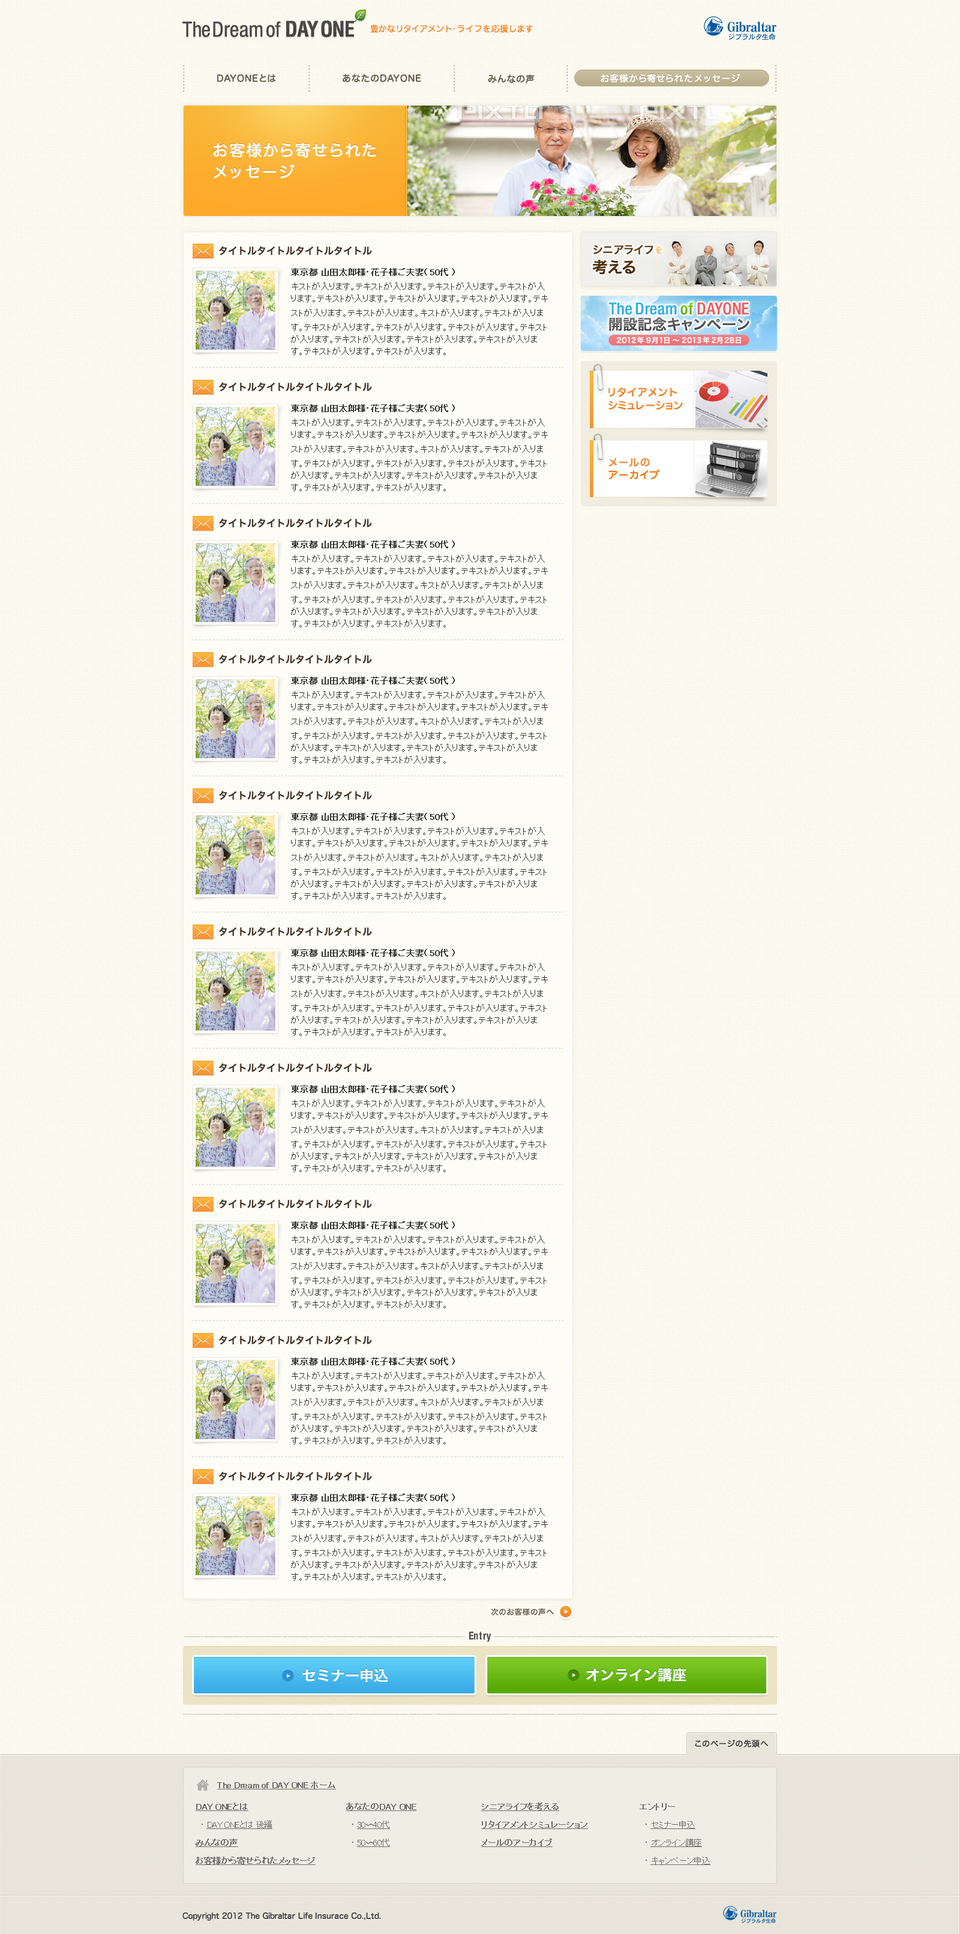
<style>
.page{position:relative;width:960px;height:1934px}
.page>*{position:absolute;margin:0}
.t1{font:21px "Helvetica57-Condensed";color:#474644}
.t2{font:21px "Helvetica-CondensedBold";color:#474644}
.t3{font:8.4px "HiraMaruProN-W4";color:#f18020}
.t4{font:9px "HiraMaruProN-W4";letter-spacing:0.05em;color:#665f4a;font-weight:bold}
.t5{font:9px "HiraMaruProN-W4";letter-spacing:0.05em;color:#ffffff;font-weight:bold}
.t6{font:15.6px/21.6px "HiraMaruProN-W4";letter-spacing:0.05em;color:#ffffff;font-weight:bold}
.t7{font:9.6px "HiraKakuPro-W6";color:#423425}
.t8{font:10.8px/18px "HiraKakuPro-W6";color:#503513}
.t9{font:15.6px/19.2px "HiraKakuPro-W6";color:#503513}
.t10{font:8.4px "RyuminPro-Medium";color:#faa938}
.t11{font:9px/12px "MS-PGothic";color:#333333}
.t12{font:8.4px/14.4px "MS-PGothic";color:#333333;font-weight:bold}
.t13{font:9px/14.4px "MS-PGothic";color:#333333}
.t14{font:16.5px "Helvetica67-CondensedMedium";color:#35aee5}
.t15{font:16.5px "Helvetica67-CondensedMedium";color:#6bb817}
.t16{font:16.5px "Helvetica67-CondensedMedium";color:#e76165}
.t17{font:14.6px "HiraKakuPro-W6";color:#565656}
.t18{font:7.2px "HiraKakuPro-W6";color:#ffffff}
.t19{font:10.2px "HiraMaruProN-W4";color:#f18224;font-weight:bold}
.t20{font:10.2px "HiraMaruProN-W4";color:#f17d1b;font-weight:bold}
.t21{font:10.2px/12.6px "HiraMaruProN-W4";letter-spacing:0.02em;font-weight:bold}
.t22{font:7.8px "HiraKakuPro-W6";color:#71665a}
.t23{font:10.8px "HelveticaRounded-CondBold";color:#4e4c48}
.t24{font:14.4px "HiraKakuPro-W6";color:#ffffff}
.t25{font:7.8px "HiraMaruProN-W4";letter-spacing:-0.03em;color:#444444;font-weight:bold}
.t26{font:8.4px "MS-PGothic";letter-spacing:-0.03em;color:#6d6d6d;font-weight:bold;text-decoration:underline}
.t27{font:8.4px/18px "MS-PGothic";letter-spacing:-0.03em;color:#6d6d6d;font-weight:bold;text-decoration:underline}
.t28{font:8.4px/18px "MS-PGothic";letter-spacing:-0.03em;color:#6d6d6d}
.t29{font:8.4px/18px "MS-PGothic";letter-spacing:-0.03em;color:#6d6d6d;text-decoration:underline}
.t30{font:8.4px/18px "MS-PGothic";letter-spacing:-0.03em;color:#6d6d6d;font-weight:bold}
</style>
<div class="page">
<p class="t1" style="left:182px;top:20px;width:172px;height:17px">The Dream of <span class="t2">DAY ONE</span></p>
<p class="t3" style="left:370px;top:25px;width:163px;height:8px">豊かなリタイアメント・ライフを応援します</p>
<p class="t4" style="left:217px;top:74px;width:59px;height:8px">DAYONEとは</p>
<p class="t4" style="left:343px;top:74px;width:78px;height:9px">あなたのDAYONE</p>
<p class="t4" style="left:488px;top:74px;width:47px;height:9px">みんなの声</p>
<p class="t5" style="left:601px;top:74px;width:139px;height:9px">お客様から寄せられたメッセージ</p>
<p class="t6" style="left:213px;top:142px;width:163px;height:37px">お客様から寄せられた<br>メッセージ</p>
<p class="t7" style="left:219px;top:246px;width:153px;height:10px">タイトルタイトルタイトルタイトル</p>
<p class="t8" style="left:592px;top:245px;width:61px;height:30px">シニアライフ  <br><span class="t9">考える</span></p>
<p class="t10" style="left:656px;top:246px;width:6px;height:8px">を</p>
<p class="t11" style="left:291px;top:268px;width:257px;height:87px"><span class="t12">東京都 山田太郎様・花子様ご夫妻( 50代 )<br></span><span class="t13">キストが入ります。テキストが入ります。テキストが入ります。テキ</span>ストが入ります。テキストが入ります。テキストが入ります。テキストが入ります。テキストが入ります。テキストが入ります。<span class="t13">キストが入ります。テキストが入ります。テキストが入ります。テキ</span>ストが入ります。テキストが入ります。テキストが入ります。テキストが入ります。テキストが入ります。テキストが入ります。テキストが入ります。テキストが入ります。</p>
<p class="t14" style="left:608px;top:302px;width:69px;height:13px">The Dream</p>
<p class="t15" style="left:680px;top:302px;width:13px;height:13px">of</p>
<p class="t16" style="left:697px;top:302px;width:52px;height:13px">DAY ONE</p>
<p class="t17" style="left:609px;top:317px;width:141px;height:14px">開設記念キャンペーン</p>
<p class="t18" style="left:616px;top:337px;width:125px;height:7px">2012年9月1日〜2013年2月28日</p>
<p class="t7" style="left:219px;top:382px;width:153px;height:10px">タイトルタイトルタイトルタイトル</p>
<p class="t19" style="left:608px;top:387px;width:69px;height:10px">リタイアメント</p>
<p class="t20" style="left:608px;top:401px;width:75px;height:9px">シミュレーション</p>
<p class="t11" style="left:291px;top:404px;width:257px;height:87px"><span class="t12">東京都 山田太郎様・花子様ご夫妻( 50代 )<br></span><span class="t13">キストが入ります。テキストが入ります。テキストが入ります。テキ</span>ストが入ります。テキストが入ります。テキストが入ります。テキストが入ります。テキストが入ります。テキストが入ります。<span class="t13">キストが入ります。テキストが入ります。テキストが入ります。テキ</span>ストが入ります。テキストが入ります。テキストが入ります。テキストが入ります。テキストが入ります。テキストが入ります。テキストが入ります。テキストが入ります。</p>
<p class="t21" style="left:608px;top:458px;width:52px;height:21px">メールの<br>アーカイブ</p>
<p class="t7" style="left:219px;top:518px;width:153px;height:10px">タイトルタイトルタイトルタイトル</p>
<p class="t11" style="left:291px;top:541px;width:257px;height:87px"><span class="t12">東京都 山田太郎様・花子様ご夫妻( 50代 )<br></span><span class="t13">キストが入ります。テキストが入ります。テキストが入ります。テキ</span>ストが入ります。テキストが入ります。テキストが入ります。テキストが入ります。テキストが入ります。テキストが入ります。<span class="t13">キストが入ります。テキストが入ります。テキストが入ります。テキ</span>ストが入ります。テキストが入ります。テキストが入ります。テキストが入ります。テキストが入ります。テキストが入ります。テキストが入ります。テキストが入ります。</p>
<p class="t7" style="left:219px;top:655px;width:153px;height:9px">タイトルタイトルタイトルタイトル</p>
<p class="t11" style="left:291px;top:677px;width:257px;height:87px"><span class="t12">東京都 山田太郎様・花子様ご夫妻( 50代 )<br></span><span class="t13">キストが入ります。テキストが入ります。テキストが入ります。テキ</span>ストが入ります。テキストが入ります。テキストが入ります。テキストが入ります。テキストが入ります。テキストが入ります。<span class="t13">キストが入ります。テキストが入ります。テキストが入ります。テキ</span>ストが入ります。テキストが入ります。テキストが入ります。テキストが入ります。テキストが入ります。テキストが入ります。テキストが入ります。テキストが入ります。</p>
<p class="t7" style="left:219px;top:791px;width:153px;height:9px">タイトルタイトルタイトルタイトル</p>
<p class="t11" style="left:291px;top:813px;width:257px;height:87px"><span class="t12">東京都 山田太郎様・花子様ご夫妻( 50代 )<br></span><span class="t13">キストが入ります。テキストが入ります。テキストが入ります。テキ</span>ストが入ります。テキストが入ります。テキストが入ります。テキストが入ります。テキストが入ります。テキストが入ります。<span class="t13">キストが入ります。テキストが入ります。テキストが入ります。テキ</span>ストが入ります。テキストが入ります。テキストが入ります。テキストが入ります。テキストが入ります。テキストが入ります。テキストが入ります。テキストが入ります。</p>
<p class="t7" style="left:219px;top:927px;width:153px;height:10px">タイトルタイトルタイトルタイトル</p>
<p class="t11" style="left:291px;top:949px;width:257px;height:87px"><span class="t12">東京都 山田太郎様・花子様ご夫妻( 50代 )<br></span><span class="t13">キストが入ります。テキストが入ります。テキストが入ります。テキ</span>ストが入ります。テキストが入ります。テキストが入ります。テキストが入ります。テキストが入ります。テキストが入ります。<span class="t13">キストが入ります。テキストが入ります。テキストが入ります。テキ</span>ストが入ります。テキストが入ります。テキストが入ります。テキストが入ります。テキストが入ります。テキストが入ります。テキストが入ります。テキストが入ります。</p>
<p class="t7" style="left:219px;top:1063px;width:153px;height:10px">タイトルタイトルタイトルタイトル</p>
<p class="t11" style="left:291px;top:1085px;width:257px;height:87px"><span class="t12">東京都 山田太郎様・花子様ご夫妻( 50代 )<br></span><span class="t13">キストが入ります。テキストが入ります。テキストが入ります。テキ</span>ストが入ります。テキストが入ります。テキストが入ります。テキストが入ります。テキストが入ります。テキストが入ります。<span class="t13">キストが入ります。テキストが入ります。テキストが入ります。テキ</span>ストが入ります。テキストが入ります。テキストが入ります。テキストが入ります。テキストが入ります。テキストが入ります。テキストが入ります。テキストが入ります。</p>
<p class="t7" style="left:219px;top:1199px;width:153px;height:10px">タイトルタイトルタイトルタイトル</p>
<p class="t11" style="left:291px;top:1222px;width:257px;height:87px"><span class="t12">東京都 山田太郎様・花子様ご夫妻( 50代 )<br></span><span class="t13">キストが入ります。テキストが入ります。テキストが入ります。テキ</span>ストが入ります。テキストが入ります。テキストが入ります。テキストが入ります。テキストが入ります。テキストが入ります。<span class="t13">キストが入ります。テキストが入ります。テキストが入ります。テキ</span>ストが入ります。テキストが入ります。テキストが入ります。テキストが入ります。テキストが入ります。テキストが入ります。テキストが入ります。テキストが入ります。</p>
<p class="t7" style="left:219px;top:1336px;width:153px;height:9px">タイトルタイトルタイトルタイトル</p>
<p class="t11" style="left:291px;top:1358px;width:257px;height:87px"><span class="t12">東京都 山田太郎様・花子様ご夫妻( 50代 )<br></span><span class="t13">キストが入ります。テキストが入ります。テキストが入ります。テキ</span>ストが入ります。テキストが入ります。テキストが入ります。テキストが入ります。テキストが入ります。テキストが入ります。<span class="t13">キストが入ります。テキストが入ります。テキストが入ります。テキ</span>ストが入ります。テキストが入ります。テキストが入ります。テキストが入ります。テキストが入ります。テキストが入ります。テキストが入ります。テキストが入ります。</p>
<p class="t7" style="left:219px;top:1472px;width:153px;height:9px">タイトルタイトルタイトルタイトル</p>
<p class="t11" style="left:291px;top:1494px;width:257px;height:87px"><span class="t12">東京都 山田太郎様・花子様ご夫妻( 50代 )<br></span><span class="t13">キストが入ります。テキストが入ります。テキストが入ります。テキ</span>ストが入ります。テキストが入ります。テキストが入ります。テキストが入ります。テキストが入ります。テキストが入ります。<span class="t13">キストが入ります。テキストが入ります。テキストが入ります。テキ</span>ストが入ります。テキストが入ります。テキストが入ります。テキストが入ります。テキストが入ります。テキストが入ります。テキストが入ります。テキストが入ります。</p>
<p class="t22" style="left:491px;top:1609px;width:63px;height:7px">次のお客様の声へ</p>
<p class="t23" style="left:469px;top:1632px;width:22px;height:10px">Entry</p>
<p class="t24" style="left:302px;top:1669px;width:86px;height:13px">セミナー申込</p>
<p class="t24" style="left:586px;top:1668px;width:100px;height:14px">オンライン講座</p>
<p class="t25" style="left:695px;top:1740px;width:74px;height:8px">このページの先頭へ</p>
<p class="t26" style="left:217px;top:1781px;width:119px;height:9px">The Dream of DAY ONE ホーム</p>
<p class="t27" style="left:196px;top:1803px;width:120px;height:62px">DAY ONEとは<br><span class="t28">　・ </span><span class="t29">DAY ONEとは 後編<br></span>みんなの声<br>お客様から寄せられたメッセージ</p>
<p class="t27" style="left:346px;top:1803px;width:70px;height:44px">あなたのDAY ONE<br><span class="t28">　・ </span><span class="t29">30〜40代<br></span><span class="t28">　・ </span><span class="t29">50〜60代</span></p>
<p class="t27" style="left:481px;top:1803px;width:107px;height:44px">シニアライフを考える<br>リタイアメントシミュレーション<br>メールのアーカイブ</p>
<p class="t29" style="left:640px;top:1804px;width:70px;height:61px"><span class="t30">エントリー<br></span><span class="t28">　・ </span>セミナー申込<br><span class="t28">　・ </span>オンライン講座<br><span class="t28">　・ </span>キャンペーン申込</p>
<p class="t25" style="left:182px;top:1913px;width:199px;height:8px">Copyright 2012 The Gibraltar Life Insurace Co.,Ltd.</p>
</div>
